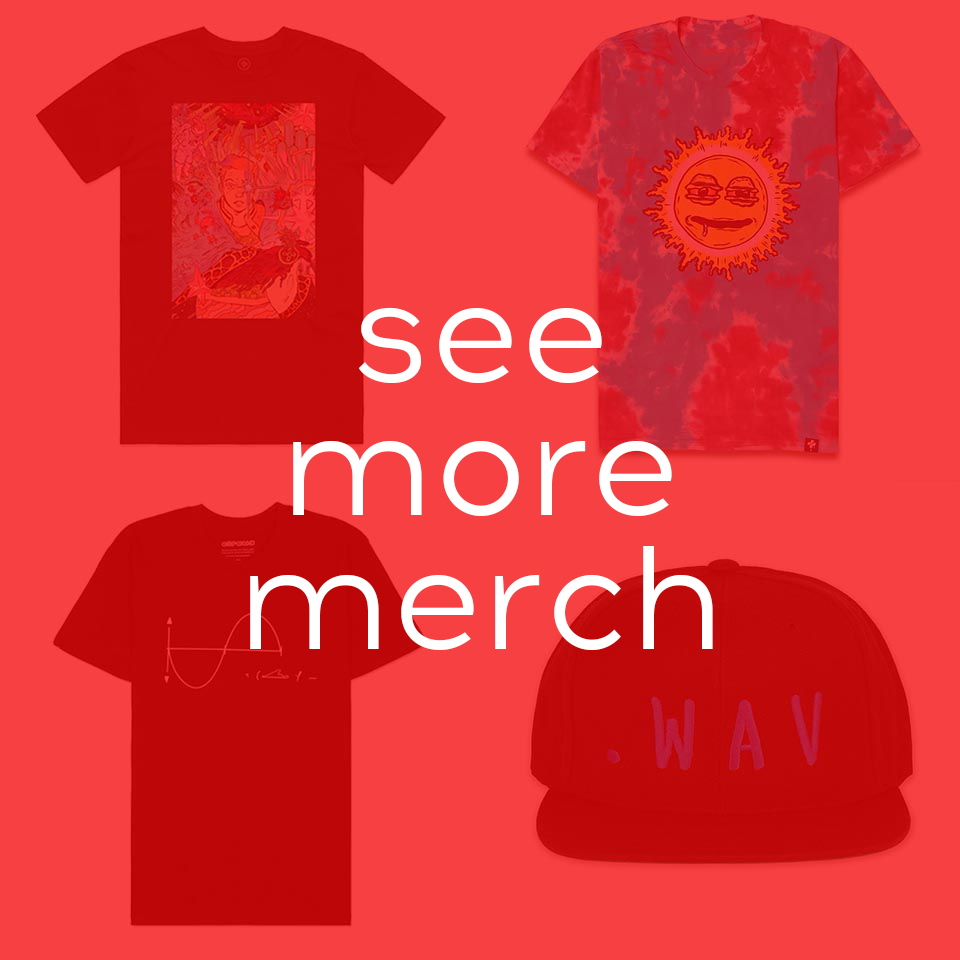
<style>
.page{position:relative;width:960px;height:960px;background:#f74042}
.page>*{position:absolute;margin:0}
.t1{font:146.6px/133.3px "Acrom-Regular";color:#ffffff}
</style>
<div class="page">
<p class="t1" style="left:250px;top:307px;width:463px;height:343px;text-align:center">see<br>more<br>merch</p>
</div>
